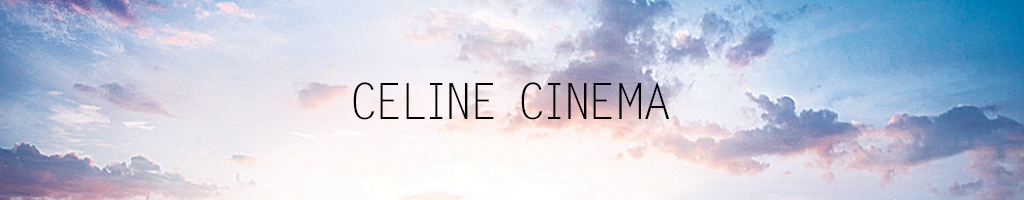
<style>
.page{position:relative;width:1024px;height:200px}
.page>*{position:absolute;margin:0}
.t1{font:12px "FZYXFW--GB1-0";color:#000000}
</style>
<div class="page">
<p class="t1" style="left:353px;top:81px;width:317px;height:39px">CELINE CINEMA</p>
</div>
